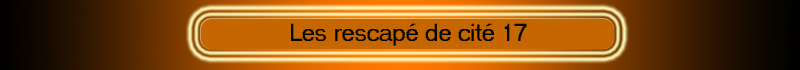
<style>
.page{position:relative;width:800px;height:70px}
.page>*{position:absolute;margin:0}
.t1{font:24px "MS Sans Serif";color:#000000}
</style>
<div class="page">
<p class="t1" style="left:291px;top:23px;width:236px;height:23px">Les rescapé de cité 17</p>
</div>
